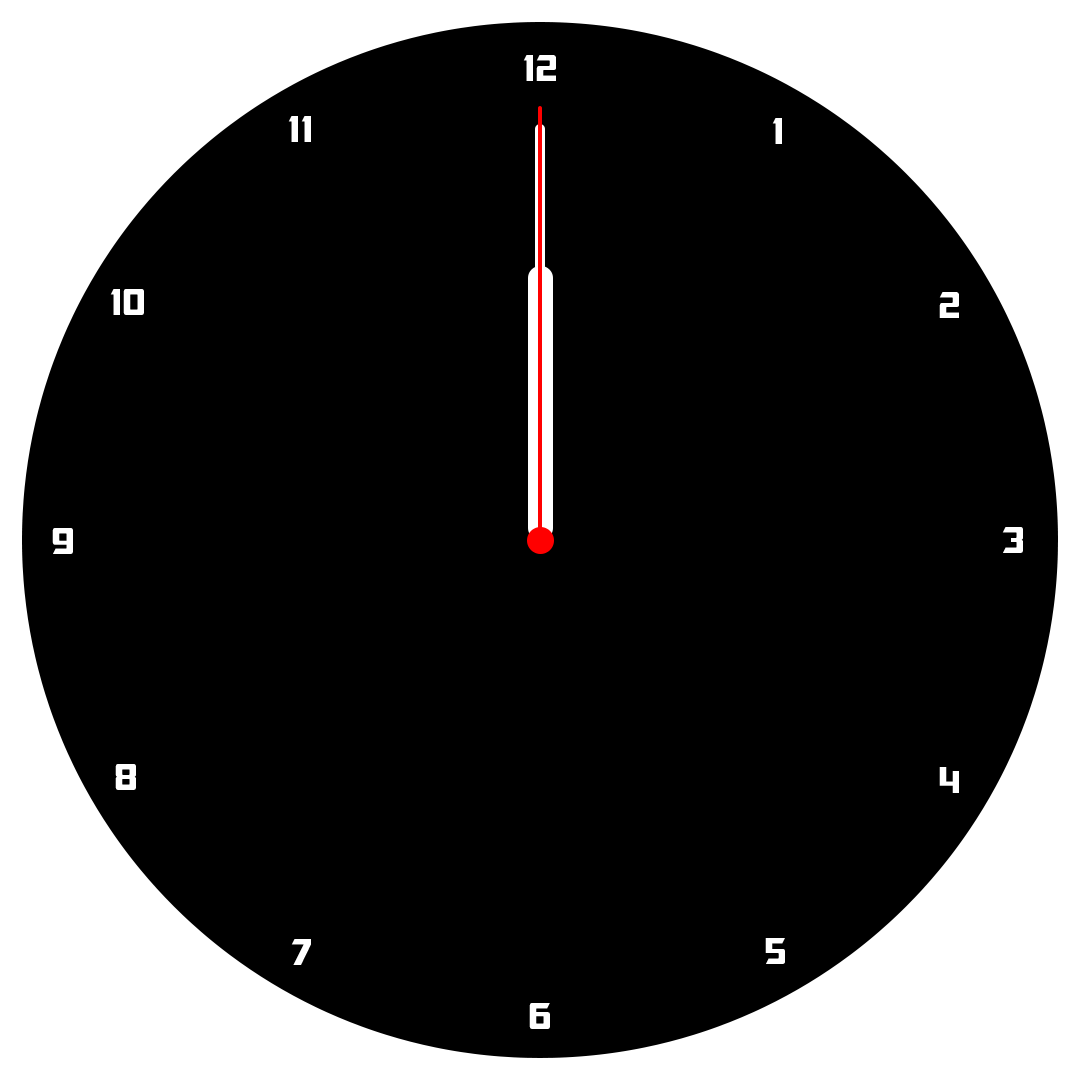
<style>
.page{position:relative;width:1080px;height:1080px;background:#000000}
.page>*{position:absolute;margin:0}
.t1{font:37.5px "Optimus";color:#ffffff}
</style>
<div class="page">
<p class="t1" style="left:523px;top:55px;width:33px;height:26px">12</p>
<p class="t1" style="left:288px;top:116px;width:23px;height:26px">11</p>
<p class="t1" style="left:772px;top:118px;width:10px;height:26px">1</p>
<p class="t1" style="left:110px;top:289px;width:34px;height:26px">10</p>
<p class="t1" style="left:939px;top:292px;width:20px;height:26px">2</p>
<p class="t1" style="left:52px;top:528px;width:21px;height:26px">9</p>
<p class="t1" style="left:1002px;top:527px;width:21px;height:26px">3</p>
<p class="t1" style="left:115px;top:764px;width:21px;height:26px">8</p>
<p class="t1" style="left:939px;top:767px;width:20px;height:26px">4</p>
<p class="t1" style="left:291px;top:939px;width:20px;height:26px">7</p>
<p class="t1" style="left:765px;top:938px;width:20px;height:26px">5</p>
<p class="t1" style="left:529px;top:1003px;width:21px;height:26px">6</p>
</div>
